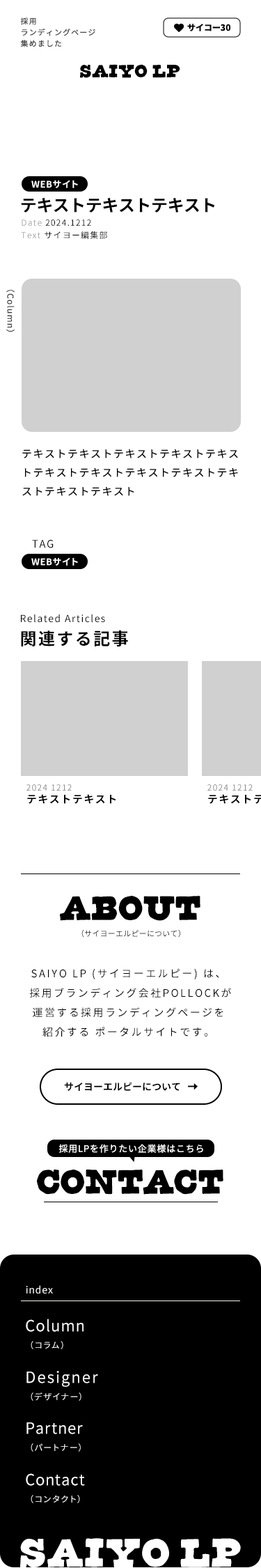
<style>
.page{position:relative;width:261px;height:1568px;background:#ffffff}
.page>*{position:absolute;margin:0}
.t1{font:7.7px/11.1px "NotoSansCJKjp-Regular";letter-spacing:0.1em;color:#404040}
.t2{font:8.4px "NotoSansCJKjp-Bold";color:#000000}
.t3{font:8.4px "NotoSansCJKjp-Bold";letter-spacing:0.04em;color:#000000}
.t4{font:20px "CornDog";letter-spacing:0.02em;color:#000000}
.t5{font:20px "CornDog";letter-spacing:-0.22em;color:#000000}
.t6{font:9.1px "NotoSansCJKjp-Bold";letter-spacing:0.04em;color:#ffffff}
.t7{font:9.1px "NotoSansCJKjp-Bold";letter-spacing:0.06em;color:#ffffff}
.t8{font:9.1px "NotoSansCJKjp-Bold";letter-spacing:-0.12em;color:#ffffff}
.t9{font:16.7px "NotoSansCJKjp-Bold";letter-spacing:-0.02em;color:#000000}
.t10{font:8.4px/12.5px "NotoSansCJKjp-Regular";letter-spacing:0.1em;color:#000000}
.t11{font:8.4px/12.5px "NotoSansCJKjp-Regular";letter-spacing:0.1em;color:#a4a4a4}
.t12{font:8.4px "NotoSansCJKjp-Regular";letter-spacing:0.1em;color:#404040}
.t13{font:10.4px/18.8px "NotoSansCJKjp-Regular";letter-spacing:0.1em;color:#000000}
.t14{font:10.4px "NotoSansCJKjp-Regular";letter-spacing:0.1em;color:#000000}
.t15{font:9.8px/16.7px "NotoSansCJKjp-Regular";letter-spacing:0.1em;color:#000000}
.t16{font:16.7px/16.7px "NotoSansCJKjp-Bold";letter-spacing:0.1em;color:#000000}
.t17{font:8.4px/10.4px "NotoSansCJKjp-Regular";letter-spacing:0.1em;color:#898989}
.t18{font:10.4px/10.4px "NotoSansCJKjp-Bold";letter-spacing:0.1em;color:#000000}
.t19{font:7.7px/5.9px "NotoSansCJKjp-Regular";letter-spacing:0.02em;color:#000000}
.t20{font:38.3px/41.1px "CornDog";color:#000000}
.t21{font:10.4px/19.5px "NotoSansCJKjp-Regular";letter-spacing:0.16em;color:#000000}
.t22{font:9.8px "NotoSansCJKjp-Bold";color:#000000}
.t23{font:9.1px "NotoSansCJKjp-Regular";letter-spacing:0.06em;color:#ffffff}
.t24{font:38.3px "CornDog";color:#000000}
.t25{font:38.3px "CornDog";letter-spacing:-0.02em;color:#000000}
.t26{font:38.3px "CornDog";letter-spacing:-0.04em;color:#000000}
.t27{font:9.8px "NotoSansCJKjp-Regular";letter-spacing:0.06em;color:#ffffff}
.t28{font:15.3px/23px "NotoSansCJKjp-Regular";letter-spacing:0.06em;color:#ffffff}
.t29{font:8.4px/23px "NotoSansCJKjp-Regular";letter-spacing:0.14em;color:#ffffff}
.t30{font:15.3px/23px "NotoSansCJKjp-Regular";letter-spacing:0.1em;color:#ffffff}
.t31{font:15.3px/23px "NotoSansCJKjp-Regular";letter-spacing:0.04em;color:#ffffff}
.t32{font:44.3px "CornDog";letter-spacing:0.02em;color:#ffffff}
.t33{font:44.3px "CornDog";letter-spacing:-0.24em;color:#ffffff}
</style>
<div class="page">
<p class="t1" style="left:20px;top:17px;width:75px;height:30px">採用<br>ランディングページ<br>集めました</p>
<p class="t2" style="left:187px;top:24px;width:44px;height:7px">サイコー<span class="t3">30</span></p>
<p class="t4" style="left:79px;top:64px;width:101px;height:14px">SAIY<span class="t5">O</span> LP</p>
<p class="t6" style="left:31px;top:180px;width:47px;height:8px">WEB<span class="t7">サ</span><span class="t8">イト</span></p>
<p class="t9" style="left:21px;top:198px;width:194px;height:14px">テキストテキストテキスト</p>
<p class="t10" style="left:21px;top:219px;width:86px;height:20px"><span class="t11">Date</span> 2024.1212 <br><span class="t11">Text</span> サイヨー編集部</p>
<p class="t12" style="left:6px;top:290px;width:9px;height:42px;rotate:90deg">（Column）</p>
<p class="t13" style="left:22px;top:449px;width:216px;height:47px">テキストテキストテキストテキストテキストテキストテキストテキストテキストテキストテキストテキスト</p>
<p class="t14" style="left:32px;top:540px;width:22px;height:8px">TAG</p>
<p class="t6" style="left:31px;top:557px;width:47px;height:9px">WEB<span class="t7">サ</span><span class="t8">イト</span></p>
<p class="t15" style="left:21px;top:614px;width:107px;height:33px">Related Articles<br><span class="t16">関連する記事</span></p>
<p class="t17" style="left:26px;top:784px;width:90px;height:20px">2024 1212<br><span class="t18">テキストテキスト</span></p>
<p class="t19" style="left:60px;top:896px;width:141px;height:42px;text-align:center"><span class="t20">ABOUT<br></span>（サイヨーエルピーについて）</p>
<p class="t21" style="left:29px;top:968px;width:202px;height:69px;text-align:center">SAIYO LP (サイヨーエルピー) は、<br> 採用ブランディング会社POLLOCKが<br>運営する採用ランディングページを<br>紹介する ポータルサイトです。</p>
<p class="t22" style="left:64px;top:1082px;width:116px;height:9px">サイヨーエルピーについて</p>
<p class="t23" style="left:59px;top:1144px;width:144px;height:9px">採用LPを作りたい企業様はこちら</p>
<p class="t24" style="left:37px;top:1170px;width:187px;height:25px"><span class="t25">C</span>ON<span class="t26">T</span><span class="t25">A</span>CT</p>
<p class="t27" style="left:26px;top:1285px;width:27px;height:9px">index</p>
<p class="t28" style="left:26px;top:1319px;width:58px;height:30px">Column<br><span class="t29">（コラム）</span></p>
<p class="t30" style="left:26px;top:1371px;width:72px;height:30px">Designer<br><span class="t29">（デザイナー）</span></p>
<p class="t31" style="left:26px;top:1422px;width:57px;height:30px">Partner<br><span class="t29">（パートナー）</span></p>
<p class="t31" style="left:26px;top:1473px;width:59px;height:30px">Contact<br><span class="t29">（コンタクト）</span></p>
<p class="t32" style="left:20px;top:1538px;width:221px;height:30px">SAIY<span class="t33">O</span> LP</p>
</div>
